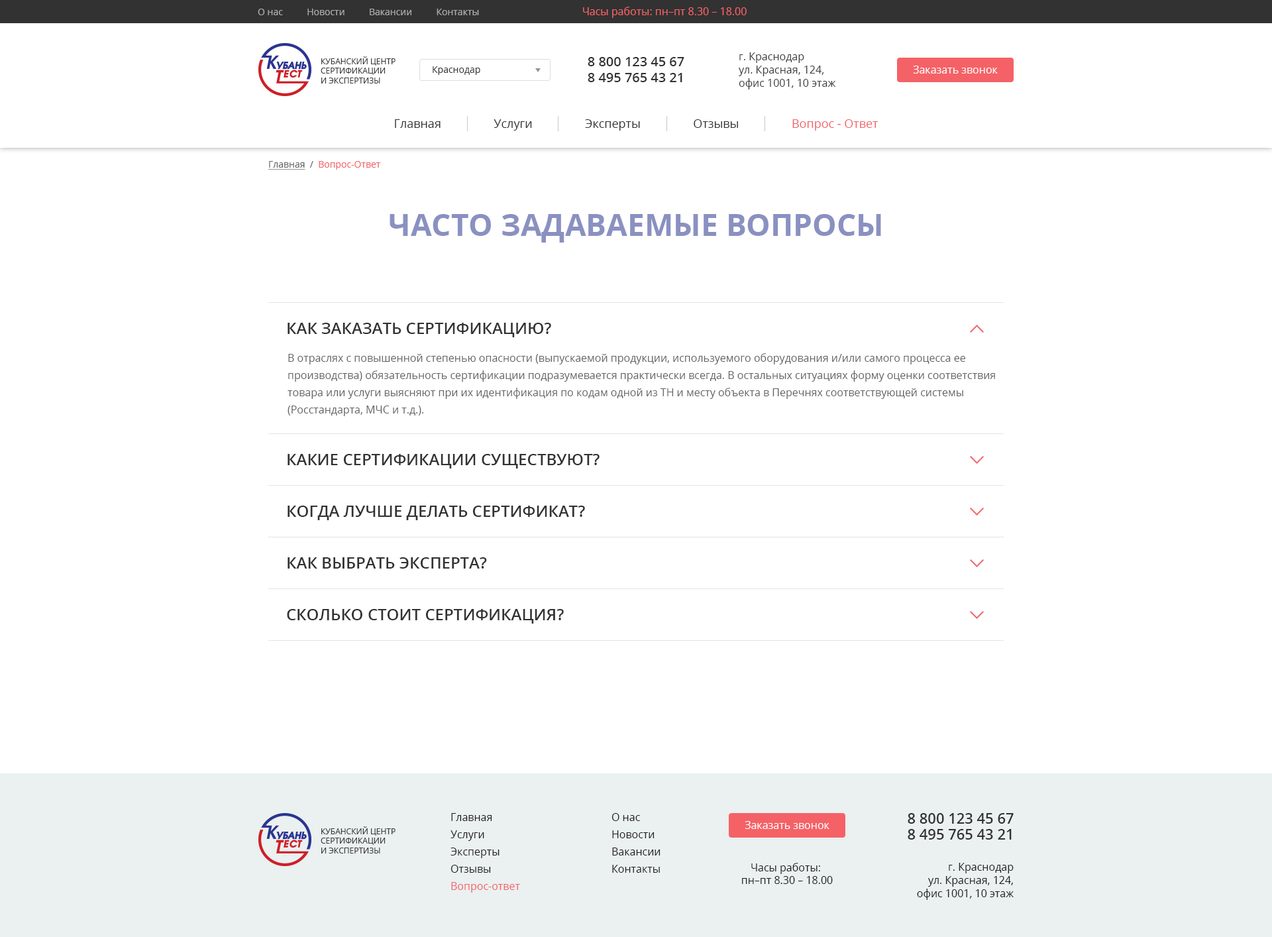
<style>
.page{position:relative;width:1272px;height:937px;background:#ffffff}
.page>*{position:absolute;margin:0}
.t1{font:9.3px "OpenSans";color:#aaaaaa}
.t2{font:10.6px "OpenSans";color:#f46267}
.t3{font:10.6px/13.3px "OpenSans";color:#3c3c3c}
.t4{font:8px "OpenSans";color:#3c3c3c;text-transform:uppercase}
.t5{font:13.3px "OpenSans-Semibold";color:#323232}
.t6{font:10.6px "OpenSans";color:#ffffff}
.t7{font:9.3px "OpenSans";color:#3c3c3c}
.t8{font:11.9px "OpenSans";color:#323232}
.t9{font:11.9px "OpenSans";color:#f46267}
.t10{font:9.3px "OpenSans";color:#f46267}
.t11{font:9.3px "OpenSans";color:#646464;text-decoration:underline}
.t12{font:9.3px "OpenSans";color:#646464}
.t13{font:30.5px "OpenSans-Bold";color:#8a91c1;text-transform:uppercase}
.t14{font:15.9px "OpenSans-Semibold";color:#323232;text-transform:uppercase}
.t15{font:10.6px/17.2px "OpenSans";color:#646464}
.t16{font:10.6px/17.2px "OpenSans";color:#1e1e1e}
.t17{font:10.6px/17.2px "OpenSans";color:#f46267}
.t18{font:14.6px "OpenSans-Semibold";color:#323232}
.t19{font:10.6px "OpenSans";color:#1e1e1e}
.t20{font:10.6px/13.3px "OpenSans";color:#1e1e1e}
</style>
<div class="page">
<p class="t1" style="left:258px;top:9px;width:221px;height:6px">О нас          Новости          Вакансии          Контакты</p>
<p class="t2" style="left:583px;top:7px;width:164px;height:11px">Часы работы: пн–пт 8.30 – 18.00</p>
<p class="t3" style="left:739px;top:52px;width:97px;height:37px">г. Краснодар<br>ул. Красная, 124, <br>офис 1001, 10 этаж</p>
<p class="t4" style="left:321px;top:56px;width:75px;height:28px">Кубанский центр<br>сертификации<br>и экспертизы</p>
<p class="t5" style="left:588px;top:57px;width:97px;height:9px">8 800 123 45 67</p>
<p class="t6" style="left:913px;top:66px;width:85px;height:8px">Заказать звонок</p>
<p class="t7" style="left:433px;top:66px;width:47px;height:9px">Краснодар</p>
<p class="t5" style="left:588px;top:73px;width:95px;height:9px">8 495 765 43 21</p>
<p class="t8" style="left:395px;top:119px;width:484px;height:12px">Главная                 Услуги                 Эксперты                 Отзывы                 <span class="t9">Вопрос - Ответ</span></p>
<p class="t10" style="left:268px;top:161px;width:113px;height:9px"><span class="t11">Главная</span><span class="t12">  /  </span>Вопрос-Ответ</p>
<p class="t13" style="left:390px;top:214px;width:491px;height:29px">Часто задаваемые вопросы</p>
<p class="t14" style="left:288px;top:323px;width:263px;height:14px">Как заказать сертификацию?</p>
<p class="t15" style="left:288px;top:353px;width:707px;height:63px">В отраслях с повышенной степенью опасности (выпускаемой продукции, используемого оборудования и/или самого процесса ее <br>производства) обязательность сертификации подразумевается практически всегда. В остальных ситуациях форму оценки соответствия <br>товара или услуги выясняют при их идентификация по кодам одной из ТН и месту объекта в Перечнях соответствующей системы <br>(Росстандарта, МЧС и т.д.).</p>
<p class="t14" style="left:288px;top:454px;width:312px;height:15px">Какие сертификации существуют?</p>
<p class="t14" style="left:288px;top:506px;width:297px;height:14px">Когда лучше делать сертификат?</p>
<p class="t14" style="left:288px;top:557px;width:199px;height:12px">Как выбрать эксперта?</p>
<p class="t14" style="left:287px;top:609px;width:277px;height:15px">Сколько стоит сертификация?</p>
<p class="t16" style="left:451px;top:813px;width:69px;height:80px">Главная<br>Услуги<br>Эксперты<br>Отзывы<br><span class="t17">Вопрос-ответ</span></p>
<p class="t16" style="left:612px;top:813px;width:49px;height:60px">О нас<br>Новости<br>Вакансии<br>Контакты</p>
<p class="t6" style="left:745px;top:821px;width:85px;height:8px">Заказать звонок</p>
<p class="t18" style="left:908px;top:813px;width:106px;height:11px">8 800 123 45 67</p>
<p class="t4" style="left:321px;top:826px;width:75px;height:28px">Кубанский центр<br>сертификации<br>и экспертизы</p>
<p class="t18" style="left:908px;top:829px;width:104px;height:11px">8 495 765 43 21</p>
<p class="t19" style="left:742px;top:863px;width:91px;height:21px;text-align:center">Часы работы: <br>пн–пт 8.30 – 18.00</p>
<p class="t20" style="left:917px;top:863px;width:97px;height:37px;text-align:right">г. Краснодар<br>ул. Красная, 124,<br>офис 1001, 10 этаж</p>
</div>
